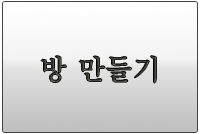
<style>
.page{position:relative;width:200px;height:134px}
.page>*{position:absolute;margin:0}
.t1{font:28px "AdobeMyungjoStd-Medium";color:#393934}
.t2{font:2.3px "BigCaslon-Medium";color:#393934}
</style>
<div class="page">
<p class="t1" style="left:41px;top:56px;width:115px;height:27px"><span class="t2"><br><br><br><br><br><br><br><br><br><br><br><br><br><br></span>방 만들기</p>
</div>
